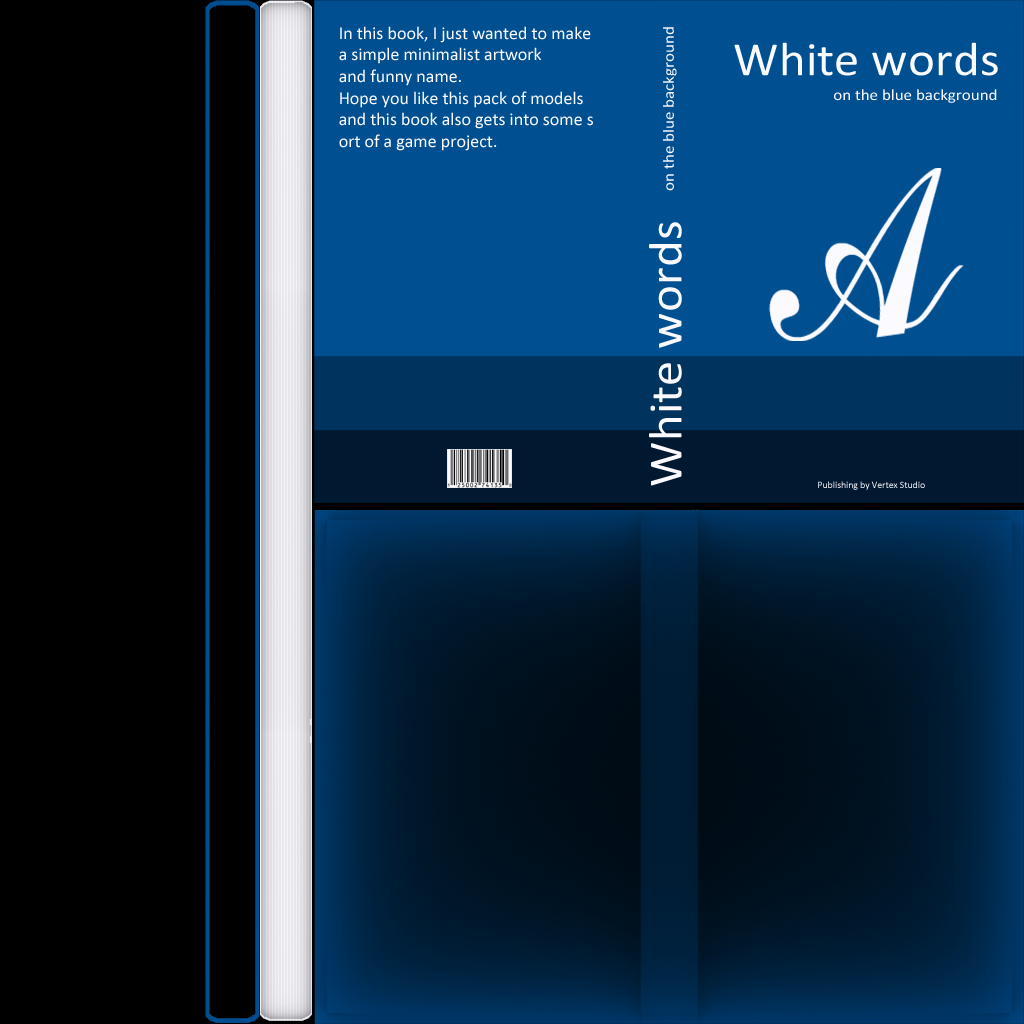
<style>
.page{position:relative;width:1024px;height:1024px;background:#000000}
.page>*{position:absolute;margin:0}
.t1{font:18px "Calibri";color:#ffffff}
.t2{font:15.8px "Calibri";color:#ffffff;scale:1.07 1}
.t3{font:47.6px "Calibri";color:#ffffff;scale:1.07 1}
.t4{font:9.7px "Calibri";color:#ffffff}
</style>
<div class="page">
<p class="t1" style="left:339px;top:26px;width:254px;height:125px">In this book, I just wanted to make <br>a simple minimalist artwork <br>and funny name. <br>Hope you like this pack of models <br>and this book also gets into some s<br>ort of a game project.</p>
<p class="t2" style="left:663px;top:27px;width:14px;height:164px;rotate:-90deg">on the blue background</p>
<p class="t3" style="left:734px;top:42px;width:264px;height:34px">White words</p>
<p class="t2" style="left:834px;top:89px;width:163px;height:14px">on the blue background</p>
<p class="t3" style="left:649px;top:222px;width:33px;height:264px;rotate:-90deg">White words</p>
<p class="t4" style="left:818px;top:481px;width:107px;height:9px">Publishing by Vertex Studio</p>
</div>
